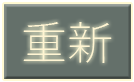
<style>
.page{position:relative;width:134px;height:82px;background:#64706a}
.page>*{position:absolute;margin:0}
.t1{font:45.8px "YuGothicUI-Light";color:#fff5d3}
</style>
<div class="page">
<p class="t1" style="left:23px;top:22px;width:89px;height:41px">重新</p>
</div>
